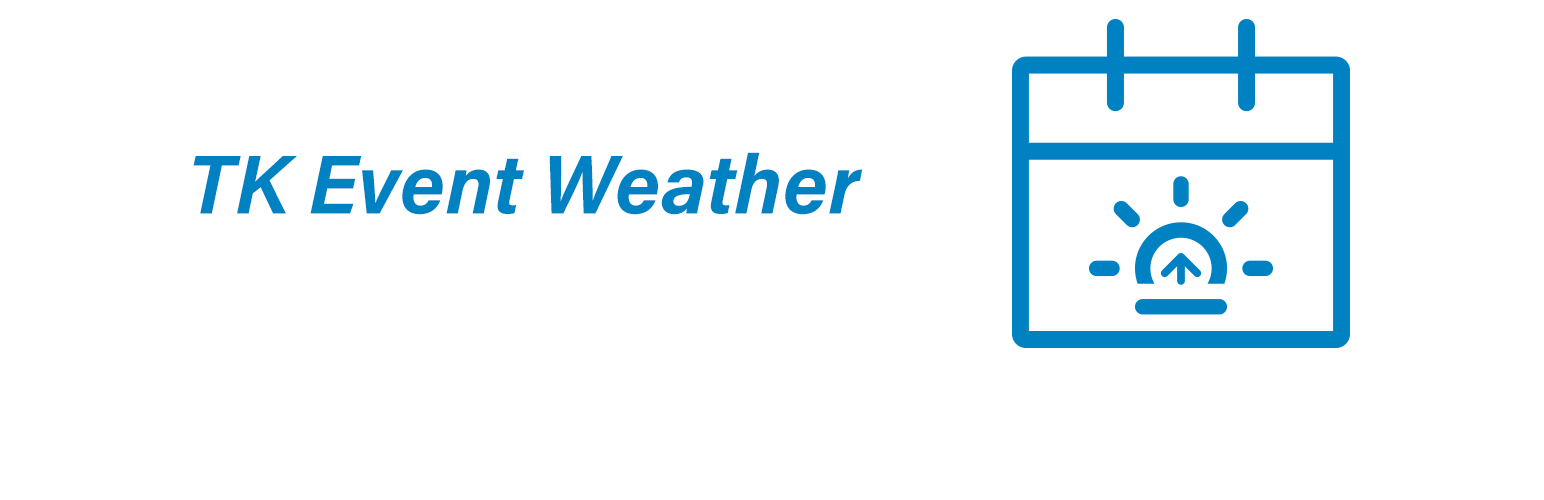
<style>
.page{position:relative;width:1544px;height:500px;background:#ffffff}
.page>*{position:absolute;margin:0}
.t1{font:83.3px "AcuminPro-BoldItalic";color:#0081c2}
</style>
<div class="page">
<p class="t1" style="left:193px;top:152px;width:670px;height:63px">TK Event Weather</p>
</div>
